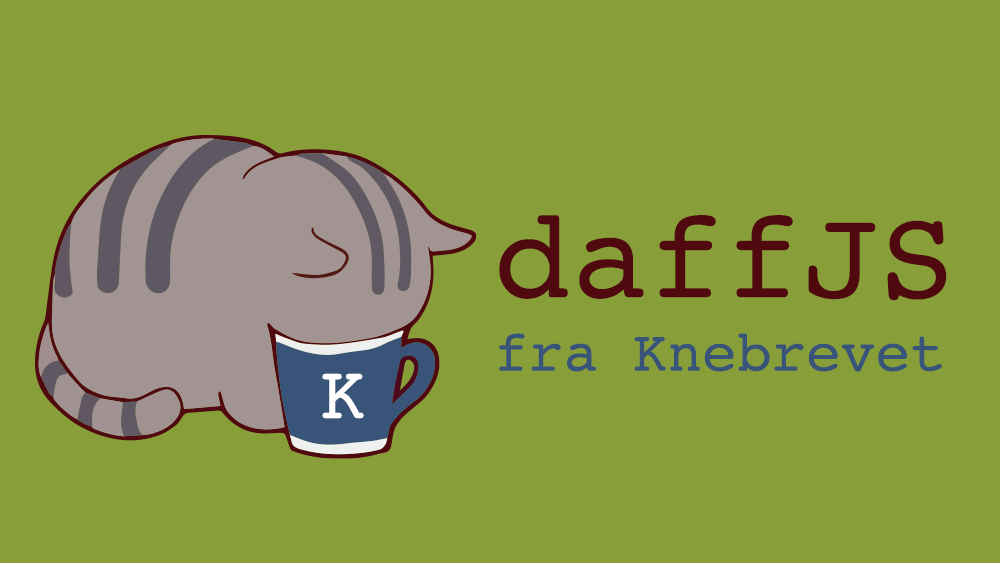
<style>
.page{position:relative;width:1000px;height:563px;background:#889f39}
.page>*{position:absolute;margin:0}
.t1{font:128.2px "Courier";color:#50090f}
.t2{font:57.8px "Courier";color:#385479}
.t3{font:76.2px "Courier";color:#ffffff}
</style>
<div class="page">
<p class="t1" style="left:499px;top:215px;width:448px;height:86px">daffJS</p>
<p class="t2" style="left:499px;top:333px;width:443px;height:39px">fra Knebrevet</p>
<p class="t3" style="left:322px;top:373px;width:42px;height:46px">K</p>
</div>
